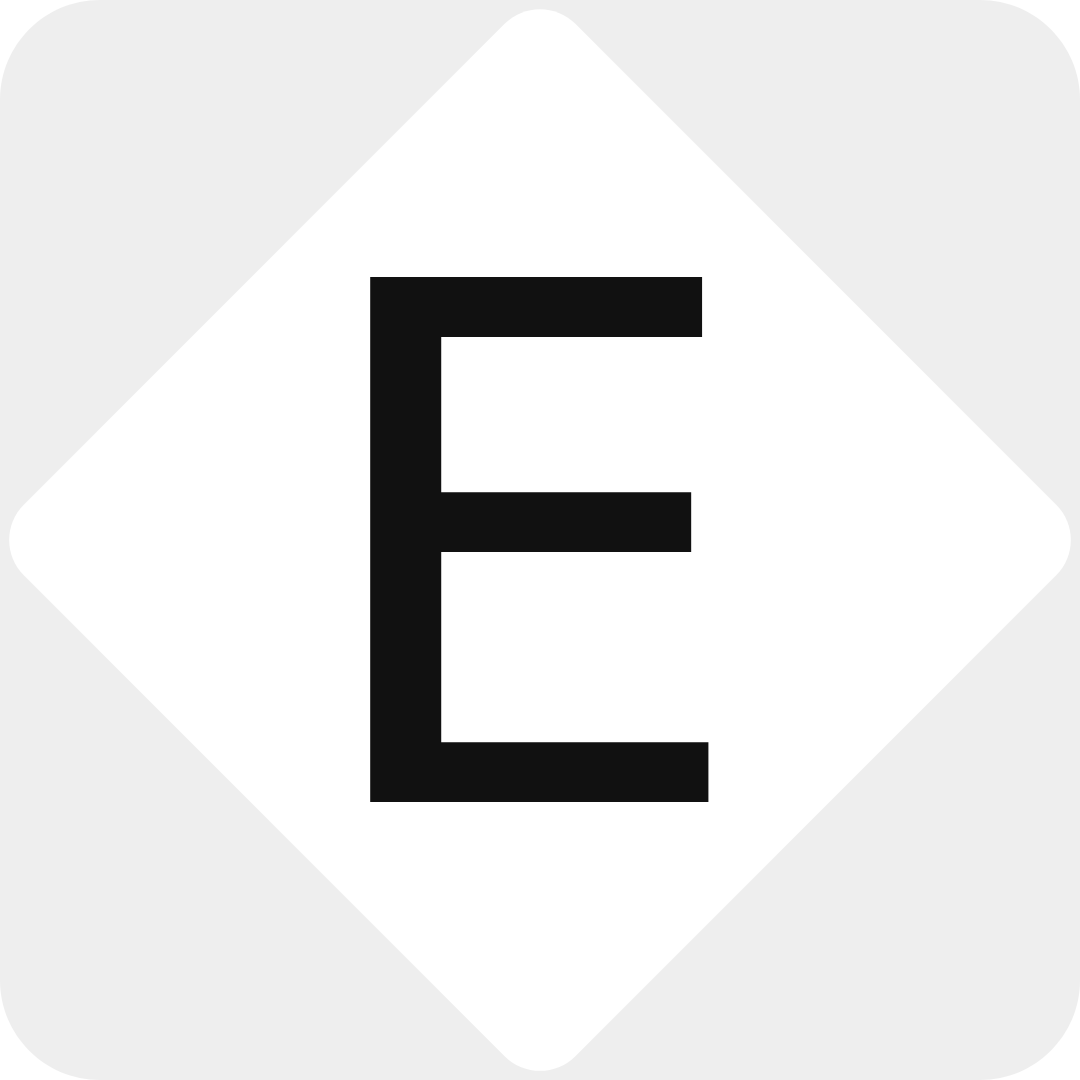
<style>
.page{position:relative;width:1080px;height:1080px;background:#eeeeee}
.page>*{position:absolute;margin:0}
.t1{font:720px "DejaVuSans";color:#111111}
</style>
<div class="page">
<p class="t1" style="left:370px;top:277px;width:339px;height:525px">E</p>
</div>
